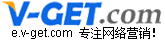
<style>
.page{position:relative;width:165px;height:40px;background:#ffffff}
.page>*{position:absolute;margin:0}
.t1{font:12px "ArialMT";letter-spacing:-0.005em;color:#000000}
.t2{font:12px "SimSun";letter-spacing:-0.005em;color:#000000}
</style>
<div class="page">
<p class="t1" style="left:12px;top:27px;width:143px;height:12px">e.v-get.com<span class="t2"> 专注网络营销！</span></p>
</div>
